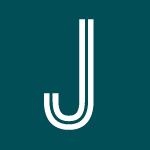
<style>
.page{position:relative;width:150px;height:150px;background:#014e56}
.page>*{position:absolute;margin:0}
.t1{font:150px "OstrichSans-Bold";letter-spacing:-0.03em;color:#ffffff}
</style>
<div class="page">
<p class="t1" style="left:44px;top:19px;width:50px;height:111px">J</p>
</div>
